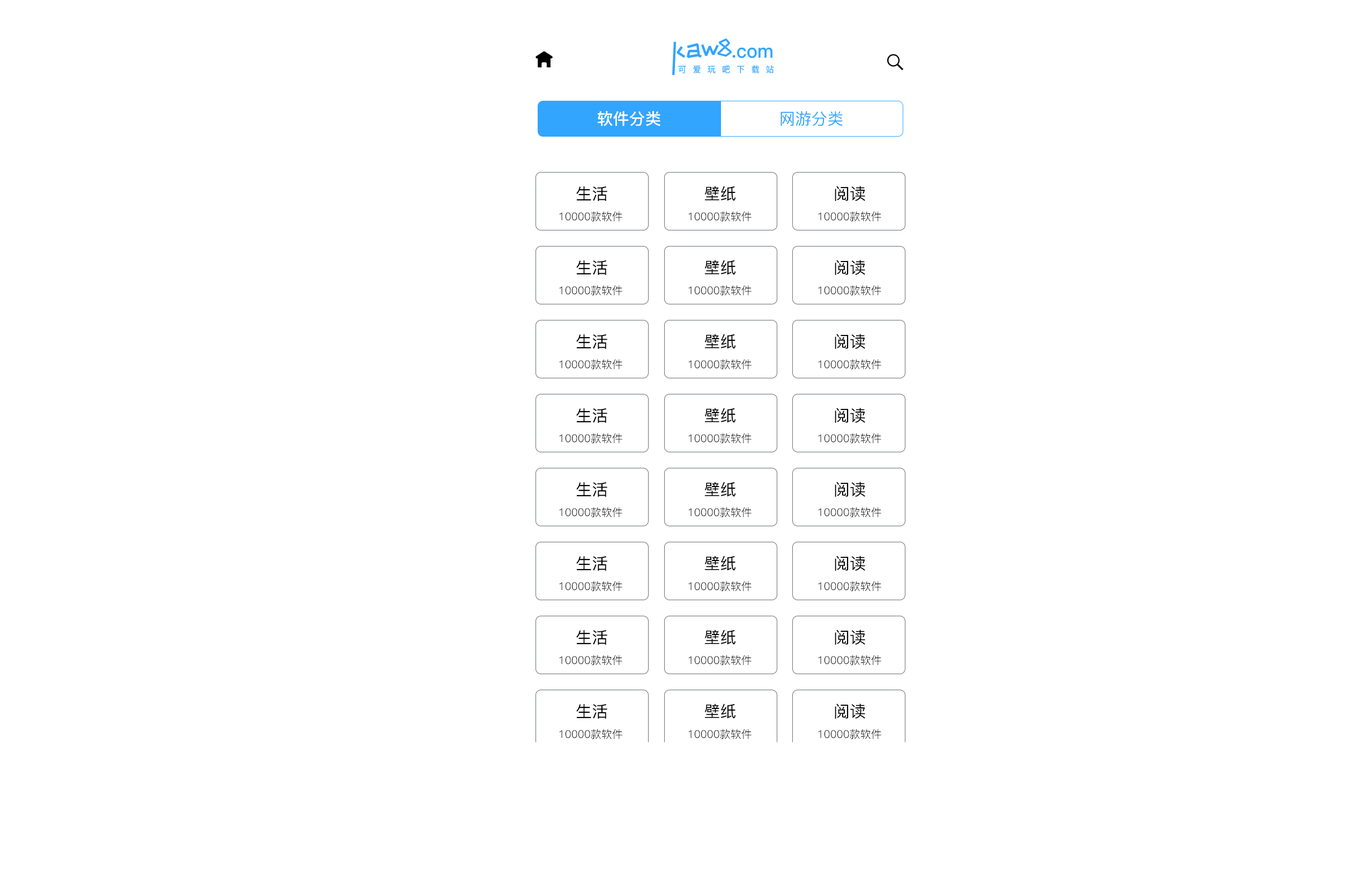
<style>
.page{position:relative;width:1353px;height:881px;background:#ffffff}
.page>*{position:absolute;margin:0}
.t1{font:16.1px "PingFang-SC-Bold";color:#ffffff}
.t2{font:16.1px "PingFang-SC-Medium";color:#31a5ff}
.t3{font:16.1px "PingFang-SC-Medium";color:#000000}
.t4{font:10.7px "PingFang-SC-Regular";color:#000000}
</style>
<div class="page">
<p class="t1" style="left:598px;top:111px;width:62px;height:16px">软件分类</p>
<p class="t2" style="left:781px;top:111px;width:62px;height:15px">网游分类</p>
<p class="t3" style="left:576px;top:186px;width:31px;height:15px">生活</p>
<p class="t3" style="left:704px;top:186px;width:32px;height:15px">壁纸</p>
<p class="t3" style="left:835px;top:186px;width:30px;height:15px">阅读</p>
<p class="t4" style="left:560px;top:211px;width:62px;height:10px">10000款软件</p>
<p class="t4" style="left:689px;top:211px;width:63px;height:10px">10000款软件</p>
<p class="t4" style="left:819px;top:211px;width:62px;height:10px">10000款软件</p>
<p class="t3" style="left:576px;top:260px;width:31px;height:15px">生活</p>
<p class="t3" style="left:704px;top:260px;width:32px;height:15px">壁纸</p>
<p class="t3" style="left:835px;top:260px;width:30px;height:15px">阅读</p>
<p class="t4" style="left:560px;top:285px;width:62px;height:10px">10000款软件</p>
<p class="t4" style="left:689px;top:285px;width:63px;height:10px">10000款软件</p>
<p class="t4" style="left:819px;top:285px;width:62px;height:10px">10000款软件</p>
<p class="t3" style="left:576px;top:334px;width:31px;height:15px">生活</p>
<p class="t3" style="left:704px;top:334px;width:32px;height:15px">壁纸</p>
<p class="t3" style="left:835px;top:334px;width:30px;height:15px">阅读</p>
<p class="t4" style="left:560px;top:359px;width:62px;height:10px">10000款软件</p>
<p class="t4" style="left:689px;top:359px;width:63px;height:10px">10000款软件</p>
<p class="t4" style="left:819px;top:359px;width:62px;height:10px">10000款软件</p>
<p class="t3" style="left:576px;top:408px;width:31px;height:15px">生活</p>
<p class="t3" style="left:704px;top:408px;width:32px;height:15px">壁纸</p>
<p class="t3" style="left:835px;top:408px;width:30px;height:15px">阅读</p>
<p class="t4" style="left:560px;top:433px;width:62px;height:10px">10000款软件</p>
<p class="t4" style="left:689px;top:433px;width:63px;height:10px">10000款软件</p>
<p class="t4" style="left:819px;top:433px;width:62px;height:10px">10000款软件</p>
<p class="t3" style="left:576px;top:482px;width:31px;height:15px">生活</p>
<p class="t3" style="left:704px;top:482px;width:32px;height:15px">壁纸</p>
<p class="t3" style="left:835px;top:482px;width:30px;height:15px">阅读</p>
<p class="t4" style="left:560px;top:507px;width:62px;height:10px">10000款软件</p>
<p class="t4" style="left:689px;top:507px;width:63px;height:10px">10000款软件</p>
<p class="t4" style="left:819px;top:507px;width:62px;height:10px">10000款软件</p>
<p class="t3" style="left:576px;top:556px;width:31px;height:15px">生活</p>
<p class="t3" style="left:704px;top:556px;width:32px;height:15px">壁纸</p>
<p class="t3" style="left:835px;top:556px;width:30px;height:15px">阅读</p>
<p class="t4" style="left:560px;top:581px;width:62px;height:10px">10000款软件</p>
<p class="t4" style="left:689px;top:581px;width:63px;height:10px">10000款软件</p>
<p class="t4" style="left:819px;top:581px;width:62px;height:10px">10000款软件</p>
<p class="t3" style="left:576px;top:630px;width:31px;height:15px">生活</p>
<p class="t3" style="left:704px;top:630px;width:32px;height:15px">壁纸</p>
<p class="t3" style="left:835px;top:630px;width:30px;height:15px">阅读</p>
<p class="t4" style="left:560px;top:655px;width:62px;height:10px">10000款软件</p>
<p class="t4" style="left:689px;top:655px;width:63px;height:10px">10000款软件</p>
<p class="t4" style="left:819px;top:655px;width:62px;height:10px">10000款软件</p>
<p class="t3" style="left:576px;top:704px;width:31px;height:15px">生活</p>
<p class="t3" style="left:704px;top:704px;width:32px;height:15px">壁纸</p>
<p class="t3" style="left:835px;top:704px;width:30px;height:15px">阅读</p>
<p class="t4" style="left:560px;top:729px;width:62px;height:10px">10000款软件</p>
<p class="t4" style="left:689px;top:729px;width:63px;height:10px">10000款软件</p>
<p class="t4" style="left:819px;top:729px;width:62px;height:10px">10000款软件</p>
</div>
